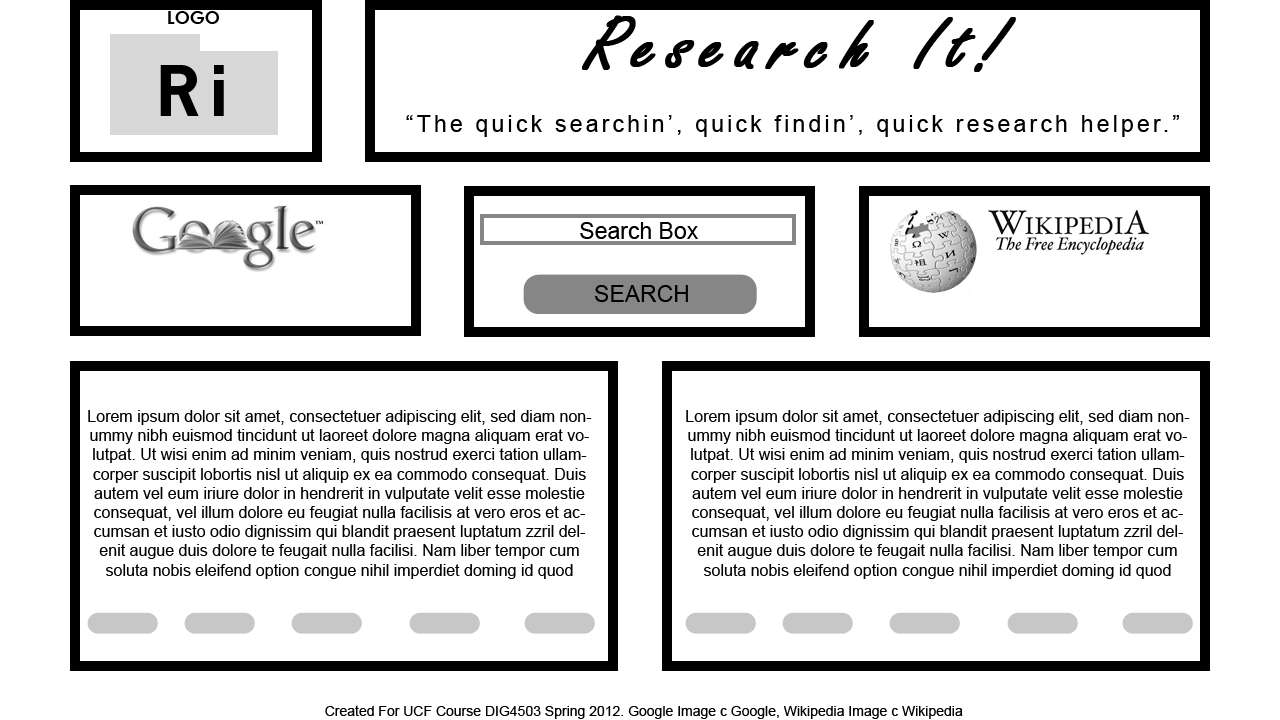
<style>
.page{position:relative;width:1280px;height:720px;background:#ffffff}
.page>*{position:absolute;margin:0}
.t1{font:18px "CenturyGothic-Bold";color:#000000}
.t2{font:79px "FreestyleScript-Regular";letter-spacing:0.14em;color:#000000;font-weight:bold;font-style:italic}
.t3{font:66px "NewsGothicStd-Bold";letter-spacing:0.14em;color:#000000}
.t4{font:23px "ArialMT";letter-spacing:0.14em;color:#000000}
.t5{font:23px "ArialMT";color:#000000}
.t6{font:16px "ArialMT";color:#000000}
.t7{font:14px "ArialMT";color:#000000}
</style>
<div class="page">
<p class="t1" style="left:168px;top:11px;width:51px;height:13px">LOGO</p>
<p class="t2" style="left:582px;top:15px;width:434px;height:57px">Research It!</p>
<p class="t3" style="left:160px;top:65px;width:64px;height:51px">Ri</p>
<p class="t4" style="left:406px;top:115px;width:773px;height:22px">“The quick searchin’, quick findin’, quick research helper.”</p>
<p class="t5" style="left:580px;top:222px;width:118px;height:17px">Search Box</p>
<p class="t5" style="left:595px;top:285px;width:93px;height:17px">SEARCH</p>
<p class="t6" style="left:88px;top:410px;width:504px;height:169px;text-align:center">Lorem ipsum dolor sit amet, consectetuer adipiscing elit, sed diam nonummy nibh euismod tincidunt ut laoreet dolore magna aliquam erat volutpat. Ut wisi enim ad minim veniam, quis nostrud exerci tation ullamcorper suscipit lobortis nisl ut aliquip ex ea commodo consequat. Duis autem vel eum iriure dolor in hendrerit in vulputate velit esse molestie consequat, vel illum dolore eu feugiat nulla facilisis at vero eros et accumsan et iusto odio dignissim qui blandit praesent luptatum zzril delenit augue duis dolore te feugait nulla facilisi. Nam liber tempor cum soluta nobis eleifend option congue nihil imperdiet doming id quod mazim placerat facer possim assum.</p>
<p class="t6" style="left:686px;top:410px;width:504px;height:169px;text-align:center">Lorem ipsum dolor sit amet, consectetuer adipiscing elit, sed diam nonummy nibh euismod tincidunt ut laoreet dolore magna aliquam erat volutpat. Ut wisi enim ad minim veniam, quis nostrud exerci tation ullamcorper suscipit lobortis nisl ut aliquip ex ea commodo consequat. Duis autem vel eum iriure dolor in hendrerit in vulputate velit esse molestie consequat, vel illum dolore eu feugiat nulla facilisis at vero eros et accumsan et iusto odio dignissim qui blandit praesent luptatum zzril delenit augue duis dolore te feugait nulla facilisi. Nam liber tempor cum soluta nobis eleifend option congue nihil imperdiet doming id quod mazim placerat facer possim assum.</p>
<p class="t7" style="left:325px;top:705px;width:638px;height:14px">Created For UCF Course DIG4503 Spring 2012. Google Image c Google, Wikipedia Image c Wikipedia</p>
</div>
